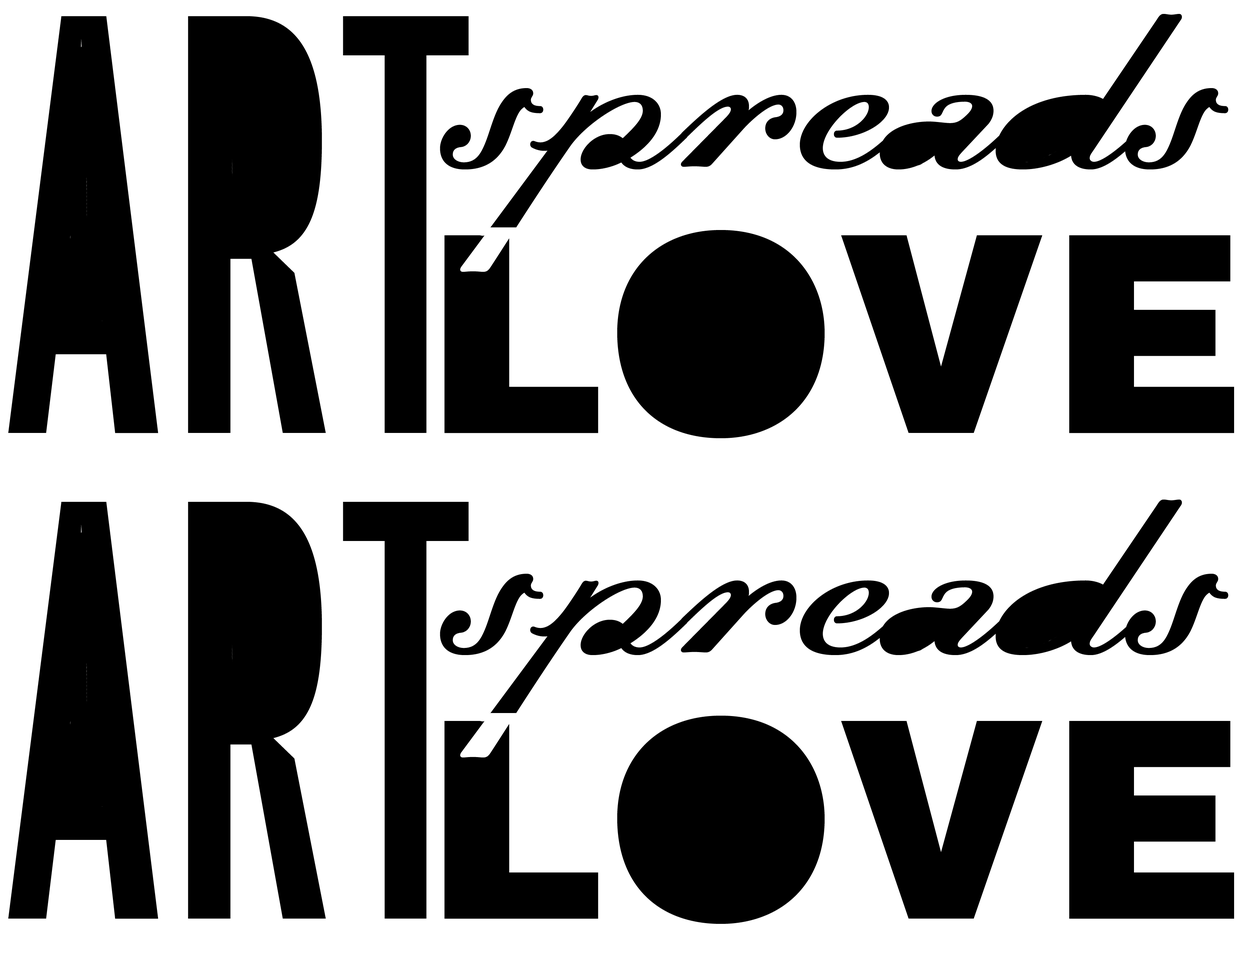
<style>
.page{position:relative;width:1242px;height:960px;background:#ffffff}
.page>*{position:absolute;margin:0}
.t1{font:1097.9px "AmplitudeExtraComp-Regular";color:#000000}
.t2{font:446.8px "DallianceScriptDisplay";color:#000000;scale:0.89 1}
.t3{font:470.5px "HelveticaLTStd-Blk";color:#000000}
</style>
<div class="page">
<p class="t1" style="left:8px;top:16px;width:461px;height:417px">ART</p>
<p class="t2" style="left:440px;top:14px;width:789px;height:258px">spreads</p>
<p class="t3" style="left:445px;top:230px;width:789px;height:208px">LOVE</p>
<p class="t1" style="left:8px;top:502px;width:461px;height:417px">ART</p>
<p class="t2" style="left:440px;top:500px;width:789px;height:257px">spreads</p>
<p class="t3" style="left:445px;top:716px;width:789px;height:208px">LOVE</p>
</div>
